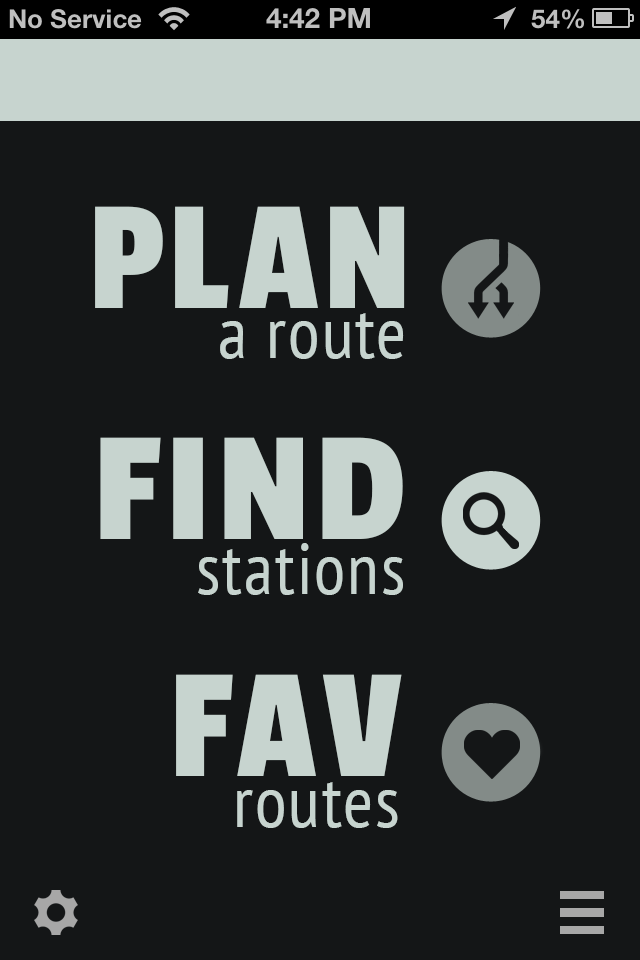
<style>
.page{position:relative;width:640px;height:960px;background:#141617}
.page>*{position:absolute;margin:0}
.t1{font:163px "PassionOne-Regular";letter-spacing:0.025em;color:#c7d4cf}
.t2{font:72.4px "PTSans-Narrow";letter-spacing:0.025em;color:#c7d4cf}
.t3{font:162.6px "PassionOne-Regular";letter-spacing:0.025em;color:#c7d4cf;scale:1.07 1}
</style>
<div class="page">
<p class="t1" style="left:95px;top:206px;width:310px;height:102px">PLAN</p>
<p class="t2" style="left:220px;top:313px;width:184px;height:46px">a route</p>
<p class="t3" style="left:100px;top:437px;width:303px;height:102px">FIND</p>
<p class="t2" style="left:198px;top:543px;width:205px;height:52px">stations</p>
<p class="t1" style="left:176px;top:674px;width:226px;height:102px">FAV</p>
<p class="t2" style="left:237px;top:782px;width:161px;height:46px">routes</p>
</div>
